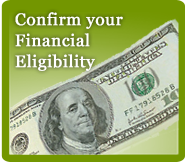
<style>
.page{position:relative;width:185px;height:162px}
.page>*{position:absolute;margin:0}
.t1{font:16.7px/21.3px "Georgia";letter-spacing:0.02em;color:#ffffff;font-weight:bold}
</style>
<div class="page">
<p class="t1" style="left:15px;top:12px;width:108px;height:59px">Confirm your<br>Financial<br>Eligibility</p>
</div>
